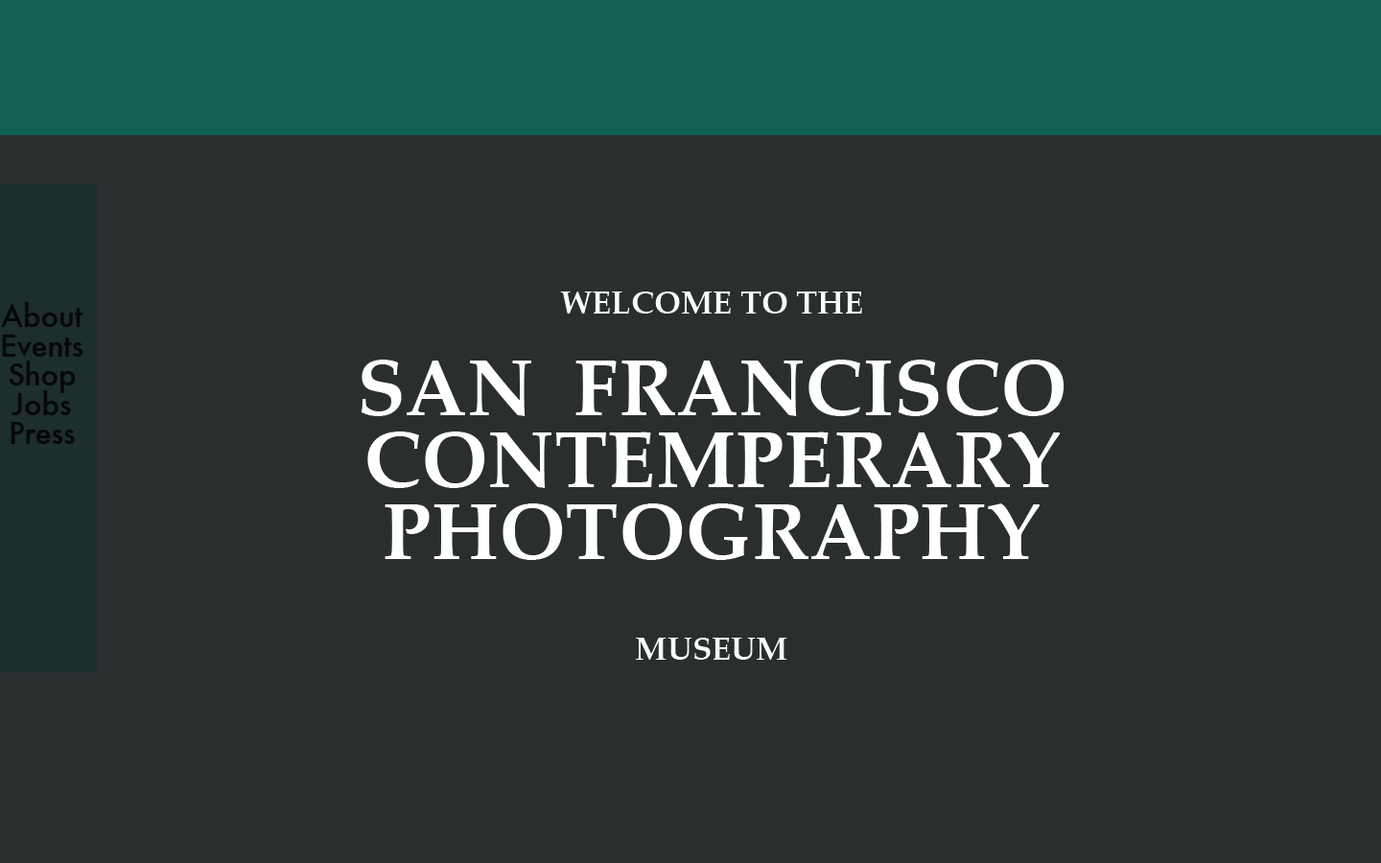
<style>
.page{position:relative;width:1381px;height:863px;background:#2a2e2f}
.page>*{position:absolute;margin:0}
.t1{font:79.9px/71.9px "Palatino-Bold";color:#ffffff;text-transform:uppercase}
.t2{font:32px/29.3px "Palatino-Bold";color:#ffffff;text-transform:uppercase}
.t3{font:29.3px/29.3px "Futura-Medium";color:#060808}
</style>
<div class="page">
<p class="t1" style="left:361px;top:292px;width:704px;height:368px;text-align:center"><span class="t2">Welcome to the <br><br></span>San  Francisco<br>Contemperary <br>Photography<br><br><span class="t2">Museum</span></p>
<p class="t3" style="left:1px;top:302px;width:82px;height:142px;text-align:center">About<br>Events<br>Shop<br>Jobs <br>Press</p>
</div>
